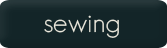
<style>
.page{position:relative;width:167px;height:48px;background:#132528}
.page>*{position:absolute;margin:0}
.t1{font:29.2px "GeosansLight";color:#eae7db}
</style>
<div class="page">
<p class="t1" style="left:44px;top:15px;width:75px;height:23px">sewing</p>
</div>
